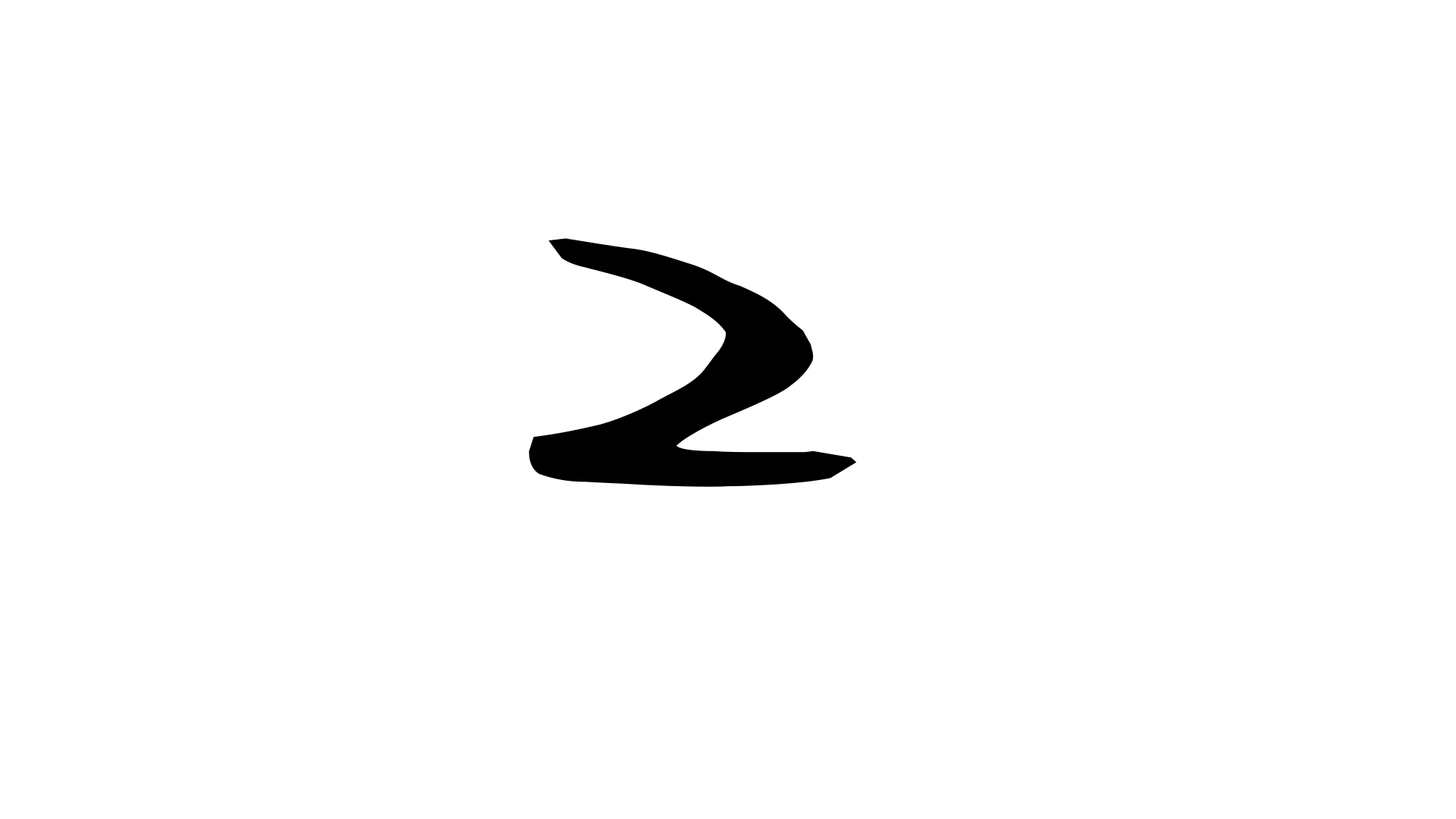
<style>
.page{position:relative;width:1456px;height:819px;background:#ffffff}
.page>*{position:absolute;margin:0}
.t1{font:337px "RiiTegakiFude";color:#000000;scale:1.93 1}
</style>
<div class="page">
<p class="t1" style="left:529px;top:238px;width:328px;height:249px">2</p>
</div>
